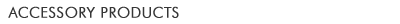
<style>
.page{position:relative;width:400px;height:24px;background:#ffffff}
.page>*{position:absolute;margin:0}
.t1{font:14.7px "FuturaBT-Light";letter-spacing:0.025em;color:#363636;text-transform:uppercase;font-weight:bold}
</style>
<div class="page">
<p class="t1" style="left:8px;top:6px;width:171px;height:12px">accessory products</p>
</div>
